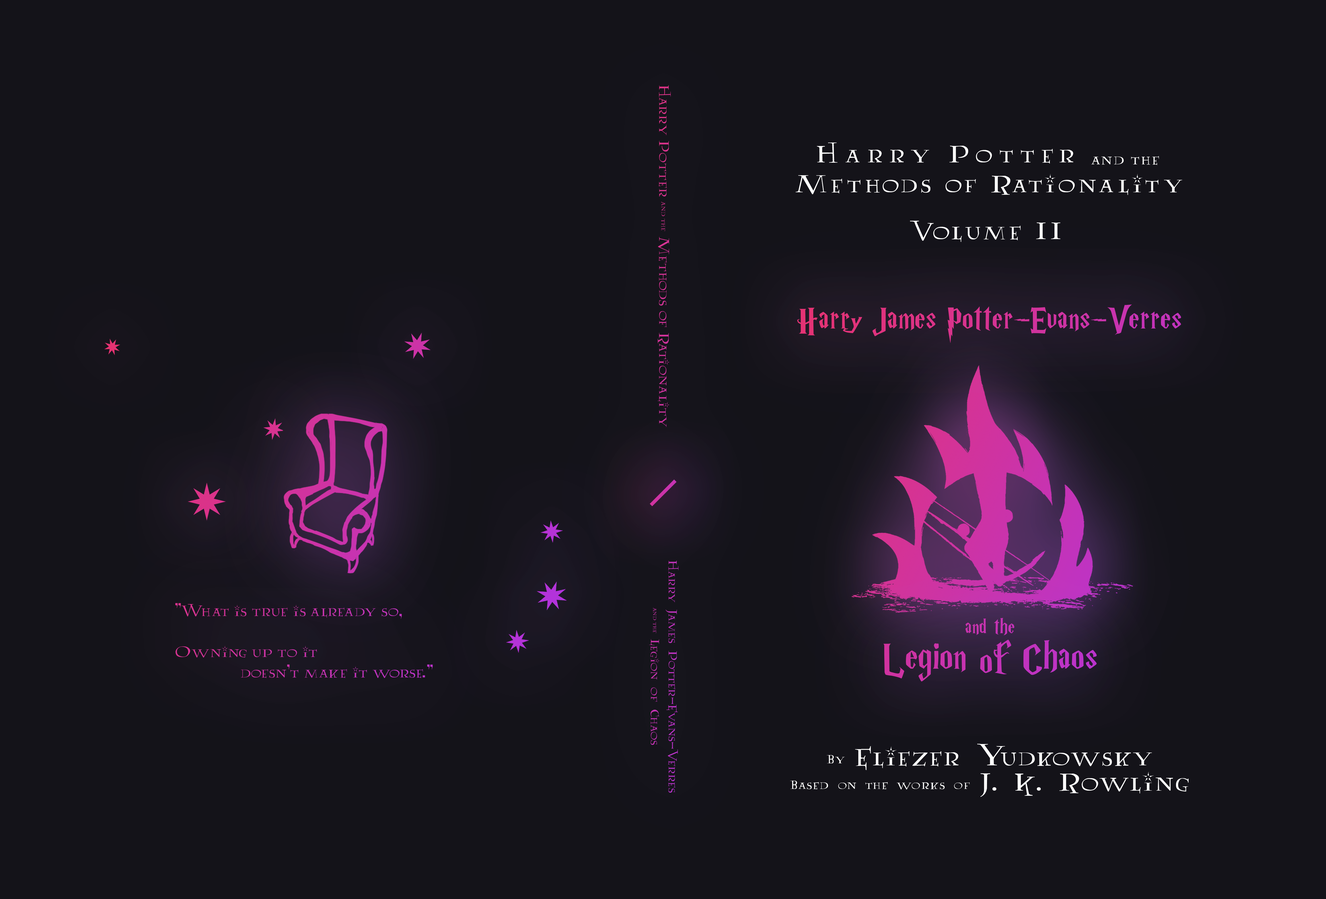
<style>
.page{position:relative;width:1326px;height:899px;background:#141319}
.page>*{position:absolute;margin:0}
.t1{font:16.1px "Lumos";color:#d53394}
.t2{font:8px "Lumos";color:#d53394}
.t3{font:27.6px/29.9px "Lumos";letter-spacing:0.1em;color:#ffffff}
.t4{font:27.6px/19.6px "Lumos";letter-spacing:0.2em;color:#ffffff}
.t5{font:17.1px/19.6px "Lumos";letter-spacing:0.05em;color:#ffffff}
.t6{font:27.6px "Lumos";letter-spacing:0.1em;color:#ffffff}
.t7{font:35.6px/42.7px "HarryPotterRussianVersionofGfdtk";letter-spacing:0.025em}
.t8{font:22.8px/42.7px "HarryPotterRussianVersionofGfdtk";letter-spacing:0.025em}
.t9{font:42.7px/42.7px "HarryPotterRussianVersionofGfdtk";letter-spacing:0.025em}
.t10{font:13.7px/17.8px "AA-Lumos-Caps";color:#c033be}
.t11{font:6.8px/13.4px "Lumos";color:#c033be}
.t12{font:17.1px "Lumos";color:#cb33a8}
.t13{font:14.2px/25.3px "AA-Lumos-Caps";letter-spacing:0.05em;color:#ffffff}
.t14{font:28.5px/25.3px "AA-Lumos-Caps";letter-spacing:0.05em;color:#ffffff}
</style>
<div class="page">
<p class="t1" style="left:657px;top:85px;width:14px;height:342px;rotate:90deg">Harry Potter <span class="t2">and the </span>Methods of Rationality</p>
<p class="t3" style="left:795px;top:143px;width:387px;height:52px;text-align:center"><span class="t4">Harry Potter</span><span class="t5">  and the<br></span>Methods of Rationality</p>
<p class="t6" style="left:910px;top:221px;width:150px;height:21px">Volume II</p>
<p class="t7" style="left:797px;top:304px;width:384px;height:378px;text-align:center">Harry James Potter-Evans-Verres<br><br><br><br><br><br><br><span class="t8">and the<br></span><span class="t9">Legion of Chaos</span></p>
<p class="t10" style="left:649px;top:561px;width:29px;height:232px;text-align:center;rotate:90deg">Harry James Potter-Evans-Verres<br><span class="t11">and the   </span>Legion of Chaos</p>
<p class="t12" style="left:175px;top:603px;width:258px;height:76px">"What is true is already so,<br>        <br>Owning up to it<br>             doesn't make it worse."</p>
<p class="t13" style="left:790px;top:744px;width:398px;height:53px;text-align:center">By <span class="t14">Eliezer Yudkowsky<br></span>Based on the works of <span class="t14">J. K. Rowling</span></p>
</div>
